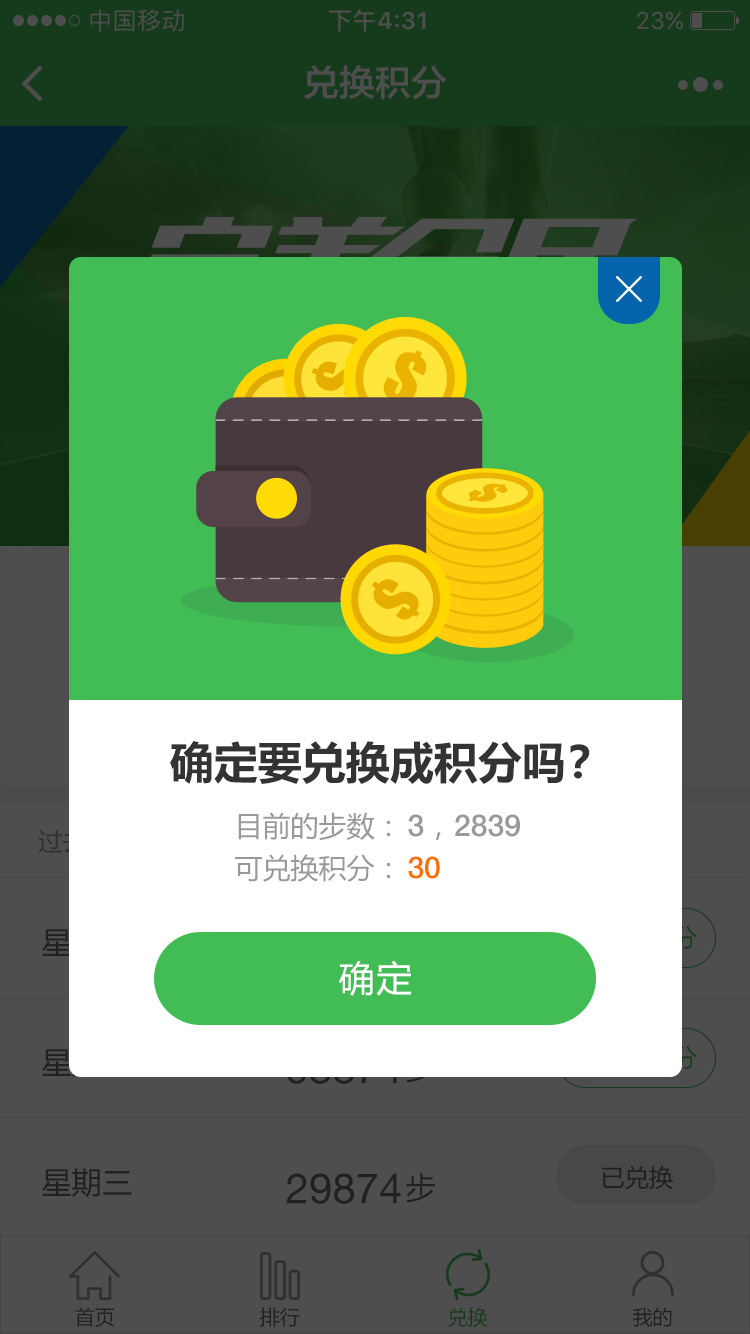
<style>
.page{position:relative;width:750px;height:1334px;background:#4e4e4e}
.page>*{position:absolute;margin:0}
.t1{font:36px "FZLTZHK--GBK1-0";color:#4e4e4e}
.t2{font:44px "MicrosoftYaHei-Bold";color:#333333}
.t3{font:44px "MicrosoftYaHei-Bold";letter-spacing:-0.2em;color:#333333}
.t4{font:28px/42px "MicrosoftYaHei";color:#999999}
.t5{font:30px/42px "HelveticaNeue-Medium";color:#999999}
.t6{font:30px/42px "MicrosoftYaHei";color:#999999}
.t7{font:30px/42px "HelveticaNeue-Medium";color:#ff6f00}
.t8{font:36px "MicrosoftYaHei";letter-spacing:0.05em;color:#ffffff}
.t9{font:20px "MicrosoftYaHei";color:#212121}
.t10{font:20px "MicrosoftYaHei";color:#163a1c}
</style>
<div class="page">
<p class="t1" style="left:304px;top:65px;width:142px;height:35px">兑换积分</p>
<p class="t2" style="left:170px;top:741px;width:420px;height:43px">确定要兑换成积分<span class="t3">吗</span>？</p>
<p class="t4" style="left:235px;top:812px;width:156px;height:70px;text-align:right">目前的步数：<br>可兑换积分：</p>
<p class="t5" style="left:408px;top:814px;width:112px;height:65px">3<span class="t6">，</span>2839<br><span class="t7">30</span></p>
<p class="t8" style="left:338px;top:960px;width:74px;height:36px">确定</p>
<p class="t9" style="left:75px;top:1307px;width:39px;height:20px">首页</p>
<p class="t9" style="left:260px;top:1307px;width:40px;height:20px">排行</p>
<p class="t10" style="left:448px;top:1307px;width:40px;height:20px">兑换</p>
<p class="t9" style="left:633px;top:1307px;width:39px;height:20px">我的</p>
</div>
